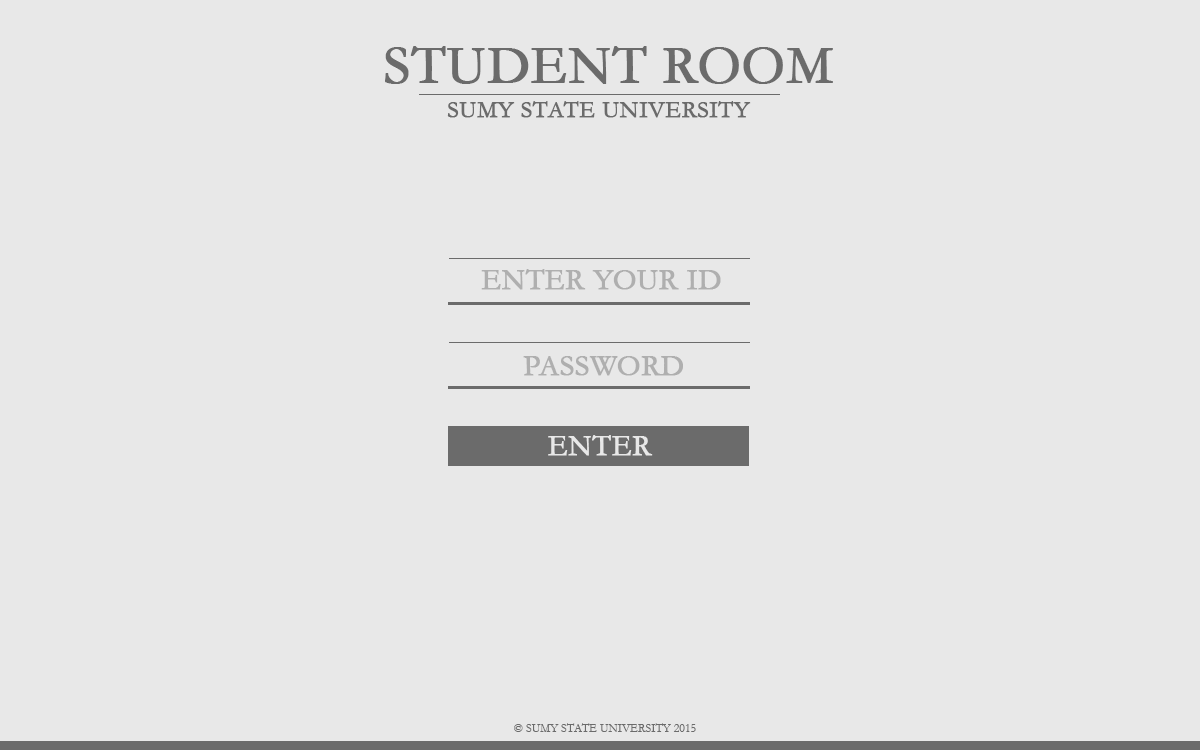
<style>
.page{position:relative;width:1200px;height:750px;background:#e8e8e8}
.page>*{position:absolute;margin:0}
.t1{font:55px "Garamond";color:#6b6b6b;text-transform:uppercase;font-weight:bold}
.t2{font:24px "Garamond";color:#6b6b6b;text-transform:uppercase;font-weight:bold}
.t3{font:30px "Garamond";color:#afafaf;text-transform:uppercase;font-weight:bold}
.t4{font:30px "Garamond";color:#e8e8e8;text-transform:uppercase;font-weight:bold}
.t5{font:12px "Garamond";color:#6b6b6b;text-transform:uppercase}
</style>
<div class="page">
<p class="t1" style="left:385px;top:46px;width:448px;height:38px">STUDENT ROOM</p>
<p class="t2" style="left:447px;top:101px;width:304px;height:17px">SUMY STATE UNIVERSITY</p>
<p class="t3" style="left:481px;top:269px;width:240px;height:21px">eNTER YOUR ID</p>
<p class="t3" style="left:523px;top:356px;width:160px;height:20px">pASSWORD</p>
<p class="t4" style="left:548px;top:435px;width:105px;height:21px">enter</p>
<p class="t5" style="left:514px;top:723px;width:182px;height:9px">© sumy state university 2015</p>
</div>
